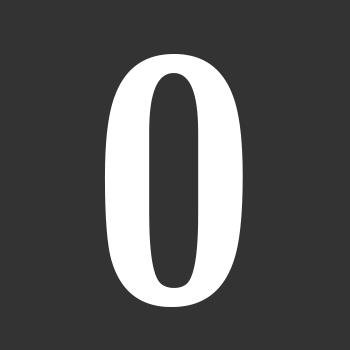
<style>
.page{position:relative;width:350px;height:350px;background:#333333}
.page>*{position:absolute;margin:0}
.t1{font:350px "CrashNumberingSerif";color:#ffffff}
</style>
<div class="page">
<p class="t1" style="left:104px;top:54px;width:139px;height:253px">0</p>
</div>
